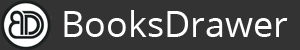
<style>
.page{position:relative;width:300px;height:50px;background:#333333}
.page>*{position:absolute;margin:0}
.t1{font:36px "OpenSans";color:#ffffff}
</style>
<div class="page">
<p class="t1" style="left:64px;top:10px;width:224px;height:27px">BooksDrawer</p>
</div>
